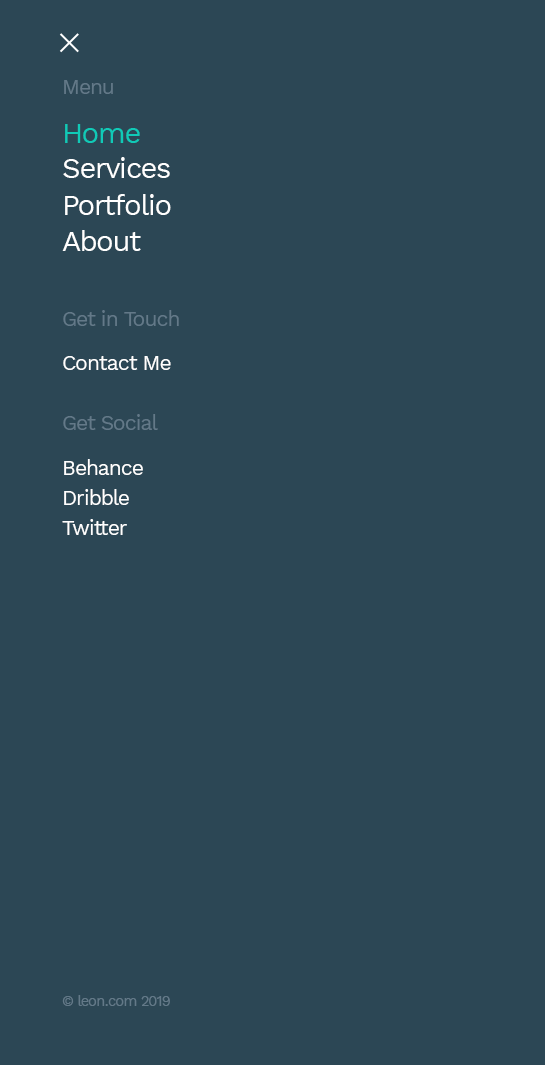
<style>
.page{position:relative;width:545px;height:1065px;background:#2c4755}
.page>*{position:absolute;margin:0}
.t1{font:21px "WorkSans-Regular";letter-spacing:-0.05em;color:#637988}
.t2{font:29px "WorkSans-Regular";letter-spacing:-0.05em;color:#10cab7}
.t3{font:29px "WorkSans-Regular";letter-spacing:-0.05em;color:#ffffff}
.t4{font:21px "WorkSans-Regular";letter-spacing:-0.05em;color:#ffffff}
.t5{font:14.6px "WorkSans-Regular";letter-spacing:-0.05em;color:#637988}
</style>
<div class="page">
<p class="t1" style="left:64px;top:80px;width:49px;height:14px">Menu</p>
<p class="t2" style="left:65px;top:124px;width:75px;height:19px">Home</p>
<p class="t3" style="left:63px;top:157px;width:107px;height:21px">Services</p>
<p class="t3" style="left:65px;top:194px;width:106px;height:21px">Portfolio</p>
<p class="t3" style="left:62px;top:230px;width:79px;height:21px">About</p>
<p class="t1" style="left:63px;top:310px;width:116px;height:16px">Get in Touch</p>
<p class="t4" style="left:63px;top:356px;width:108px;height:14px">Contact Me</p>
<p class="t1" style="left:63px;top:414px;width:95px;height:16px">Get Social</p>
<p class="t4" style="left:64px;top:459px;width:79px;height:16px">Behance</p>
<p class="t4" style="left:64px;top:489px;width:65px;height:16px">Dribble</p>
<p class="t4" style="left:62px;top:519px;width:65px;height:16px">Twitter</p>
<p class="t5" style="left:62px;top:995px;width:108px;height:11px">© leon.com 2019</p>
</div>
